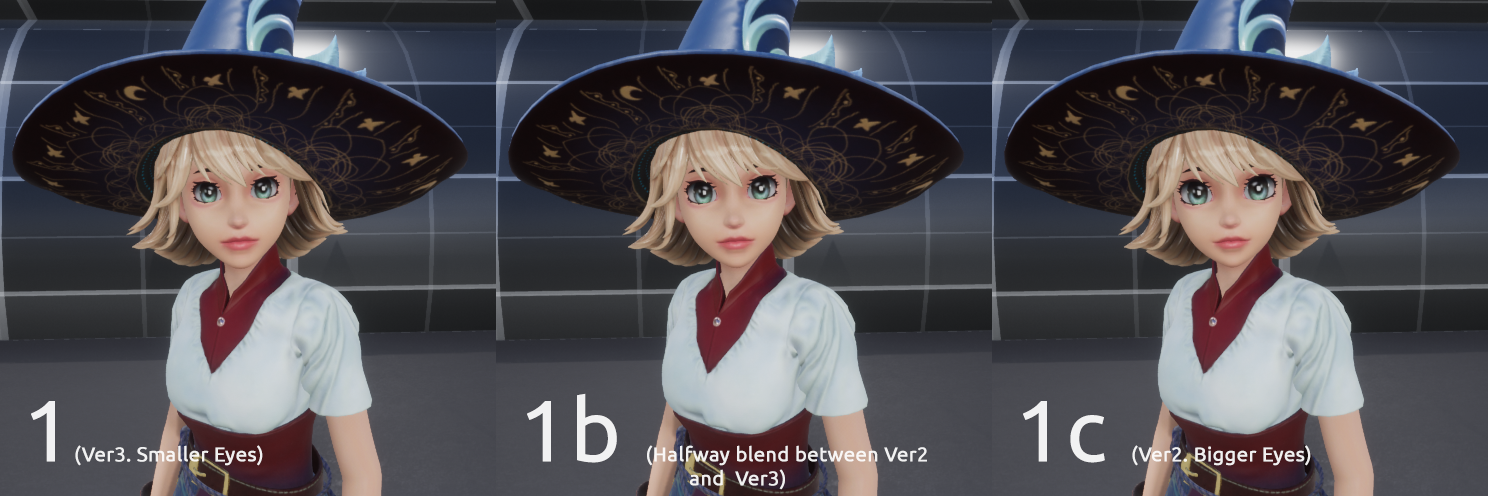
<style>
.page{position:relative;width:1488px;height:496px}
.page>*{position:absolute;margin:0}
.t1{font:20px "Ubuntu-Regular";color:#ffffff;font-weight:bold}
.t2{font:86.4px "Ubuntu-Regular";color:#ffffff;font-weight:bold}
</style>
<div class="page">
<p class="t1" style="left:31px;top:401px;width:232px;height:65px;opacity:0.9"><span class="t2">1</span>(Ver3. Smaller Eyes)</p>
<p class="t1" style="left:527px;top:393px;width:400px;height:97px;opacity:0.9"><span class="t2">1b </span>(Halfway blend between Ver2<br>                                 and  Ver3)</p>
<p class="t1" style="left:1023px;top:401px;width:288px;height:65px;opacity:0.9"><span class="t2">1c </span>(Ver2. Bigger Eyes)</p>
</div>
